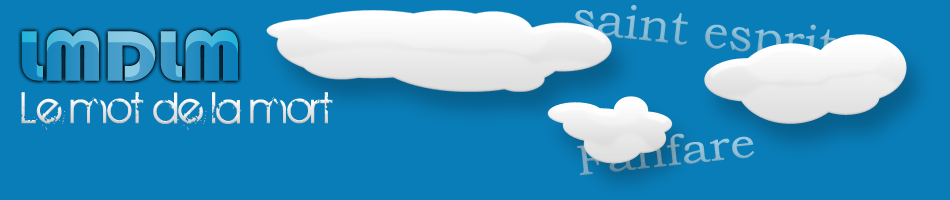
<style>
.page{position:relative;width:950px;height:200px;background:#097db8}
.page>*{position:absolute;margin:0}
.t1{font:48px "BookmanOldStyle";color:#8cbed7}
.t2{font:73.9px "Bauhaus93"}
.t3{font:48px "BIRTHOFAHERO";color:#e4e4e4}
</style>
<div class="page">
<p class="t1" style="left:573px;top:4px;width:263px;height:60px;rotate:6deg">saint esprit</p>
<p class="t2" style="left:21px;top:30px;width:217px;height:51px">LMDLM</p>
<p class="t3" style="left:21px;top:92px;width:312px;height:38px">Le mot de la mort</p>
</div>
